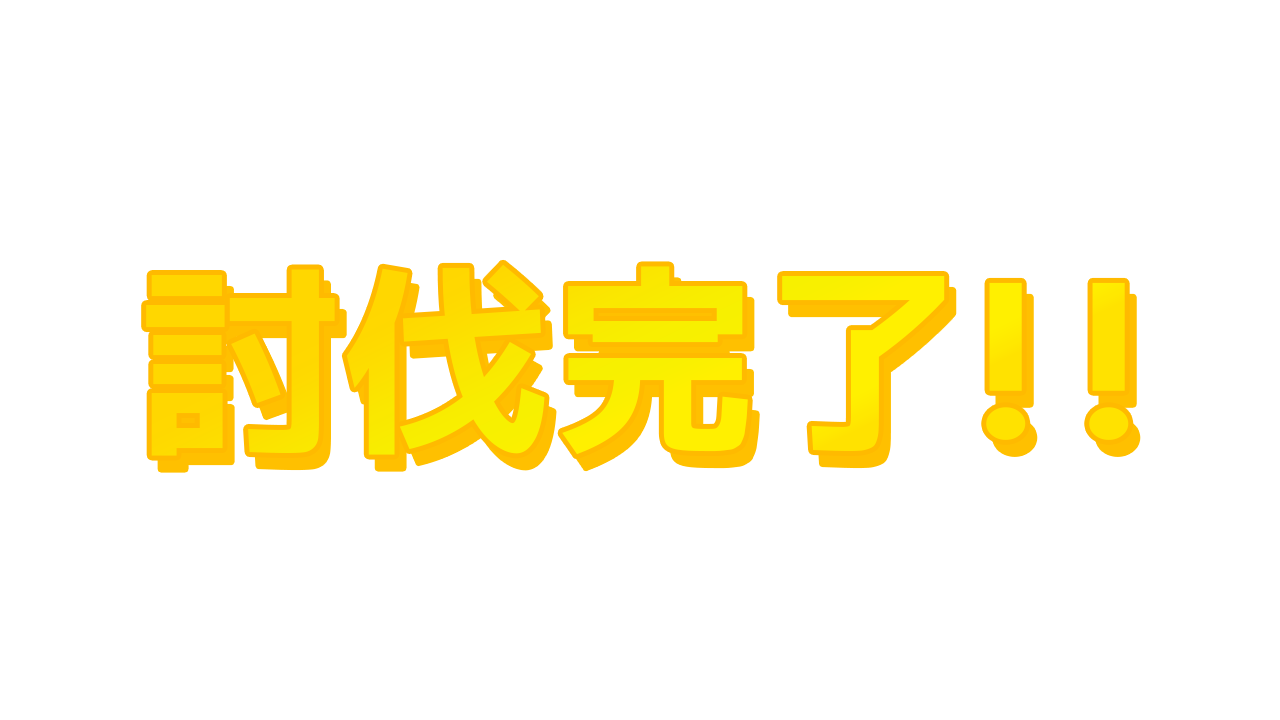
<style>
.page{position:relative;width:1280px;height:720px;background:#ffffff}
.page>*{position:absolute;margin:0}
.t1{font:208.3px "Nicoca";color:#fff000}
.t2{font:243.1px "Nicoca";color:#fff000}
</style>
<div class="page">
<p class="t1" style="left:146px;top:264px;width:983px;height:192px">討伐完了<span class="t2">!!</span></p>
</div>
